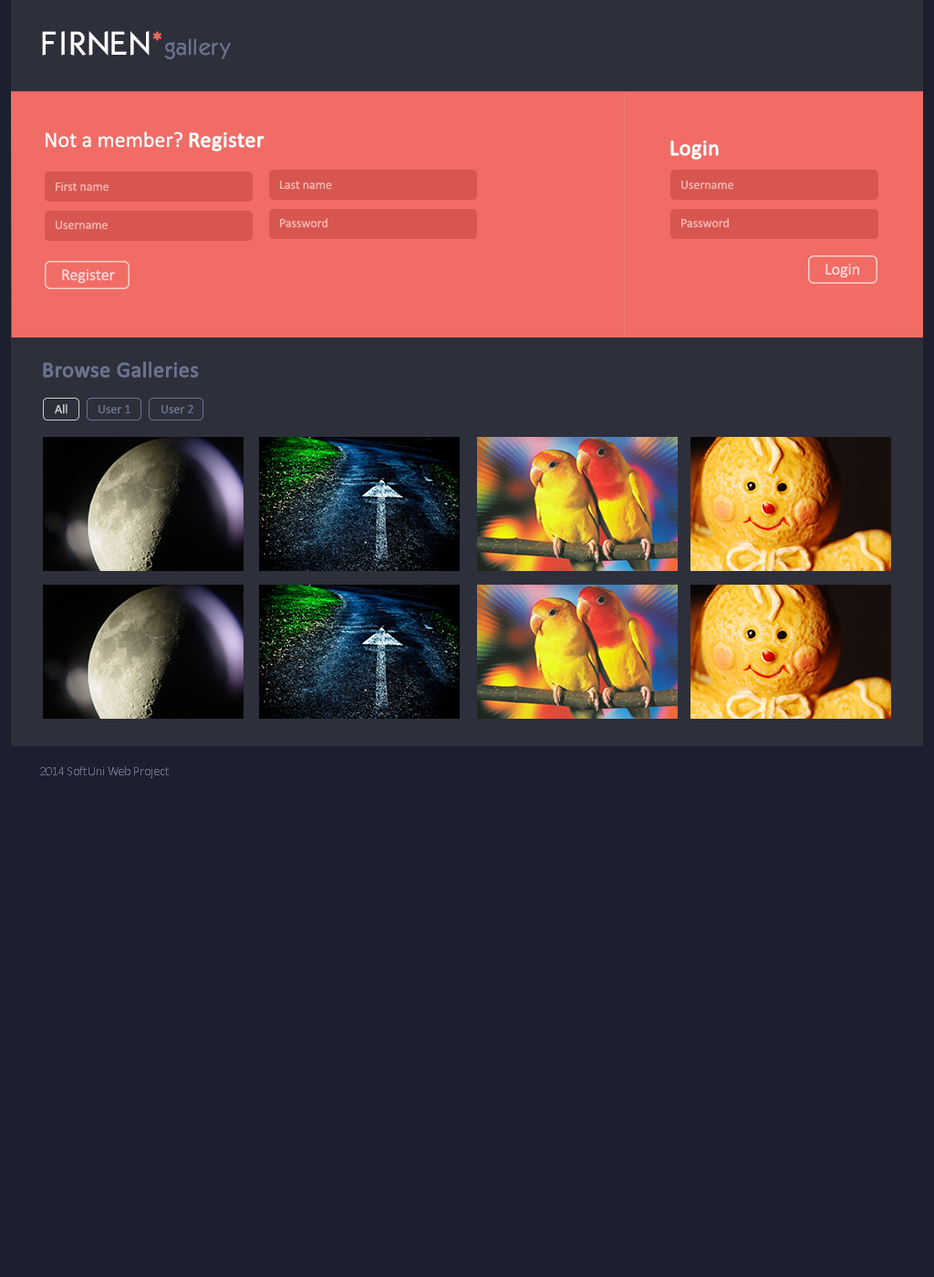
<style>
.page{position:relative;width:934px;height:1277px;background:#1b1f2e}
.page>*{position:absolute;margin:0}
.t1{font:21.9px "Kabel";letter-spacing:0.05em;color:#6a738f}
.t2{font:32.8px "Kabel";letter-spacing:0.05em;color:#ffffff}
.t3{font:32.8px "Kabel";letter-spacing:0.075em;color:#ffffff}
.t4{font:32.8px "Kabel";letter-spacing:0.01em;color:#ffffff}
.t5{font:32.8px "Kabel";letter-spacing:0.025em;color:#ffffff}
.t6{font:32.8px "Kabel";color:#ffffff}
.t7{font:32.8px "Kabel";color:#f16c65}
.t8{font:21.9px "Kabel";color:#6a738f}
.t9{font:21.9px "Kabel";letter-spacing:-0.01em;color:#6a738f}
.t10{font:21.9px "Calibri";color:#ffffff}
.t11{font:21.9px "Calibri";color:#ffffff;font-weight:bold}
.t12{font:12.8px "Calibri";color:#fab4b0}
.t13{font:16.4px "Calibri";color:#fbd8d7}
.t14{font:21.9px "Calibri";color:#6a738f;font-weight:bold}
.t15{font:12.8px "Calibri";color:#cccccc}
.t16{font:12.8px "Calibri";color:#6a738f}
.t17{font:12.8px "Calibri";color:#676b80}
</style>
<div class="page">
<p class="t1" style="left:42px;top:31px;width:189px;height:28px"><span class="t2">F</span><span class="t3">I</span><span class="t4">R</span><span class="t5">NE</span><span class="t6">N</span><span class="t7">*</span><span class="t8">g</span>all<span class="t9">e</span><span class="t8">ry</span></p>
<p class="t10" style="left:46px;top:131px;width:218px;height:20px">Not a member? <span class="t11">Register</span></p>
<p class="t11" style="left:670px;top:140px;width:49px;height:20px">Login</p>
<p class="t12" style="left:56px;top:181px;width:53px;height:11px">First name</p>
<p class="t12" style="left:280px;top:181px;width:52px;height:9px">Last name</p>
<p class="t12" style="left:681px;top:181px;width:52px;height:9px">Username</p>
<p class="t12" style="left:56px;top:221px;width:52px;height:9px">Username</p>
<p class="t12" style="left:280px;top:218px;width:47px;height:10px">Password</p>
<p class="t12" style="left:681px;top:218px;width:48px;height:10px">Password</p>
<p class="t13" style="left:62px;top:269px;width:53px;height:15px">Register</p>
<p class="t13" style="left:825px;top:264px;width:34px;height:14px">Login</p>
<p class="t14" style="left:43px;top:361px;width:156px;height:17px">Browse Galleries</p>
<p class="t15" style="left:55px;top:404px;width:12px;height:10px">All</p>
<p class="t16" style="left:98px;top:405px;width:32px;height:9px">User 1</p>
<p class="t16" style="left:161px;top:405px;width:32px;height:9px">User 2</p>
<p class="t17" style="left:40px;top:766px;width:129px;height:12px">2014 SoftUni Web Project</p>
</div>
